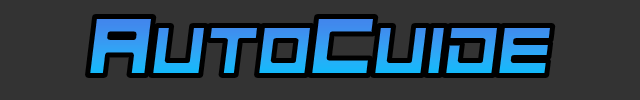
<style>
.page{position:relative;width:640px;height:100px;background:#333333}
.page>*{position:absolute;margin:0}
.t1{font:72px "PlayPretend";letter-spacing:0.005em}
.t2{font:85px "PlayPretend";letter-spacing:0.005em}
</style>
<div class="page">
<p class="t1" style="left:88px;top:17px;width:465px;height:58px"><span class="t2">A</span>UTO<span class="t2">C</span>UIDE</p>
</div>
